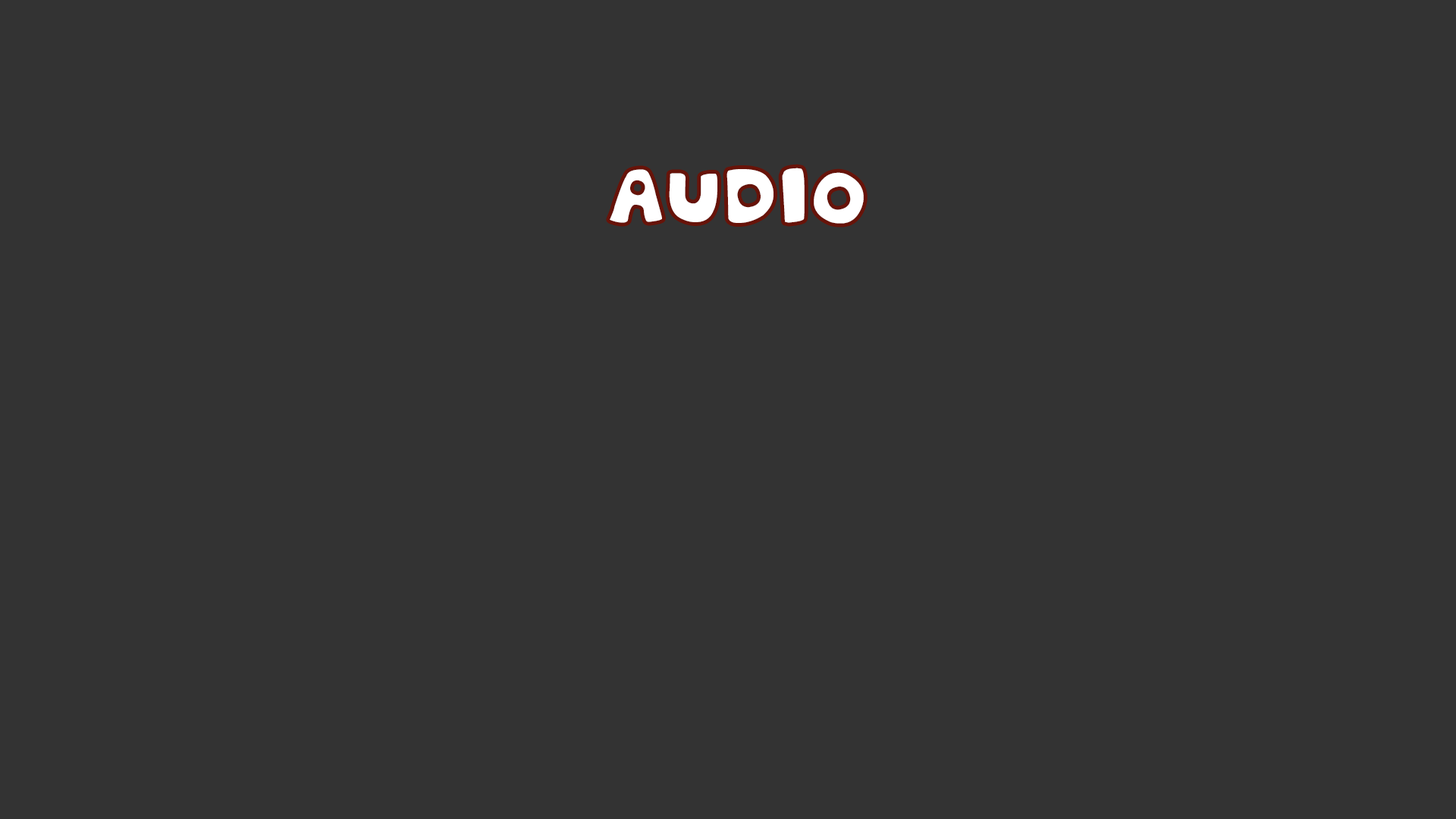
<style>
.page{position:relative;width:1456px;height:819px;background:#333333}
.page>*{position:absolute;margin:0}
.t1{font:36.4px "PatchworkStitchlingsColor";letter-spacing:-0.025em;color:#ffffff}
</style>
<div class="page">
<p class="t1" style="left:610px;top:168px;width:254px;height:56px">Audio</p>
</div>
